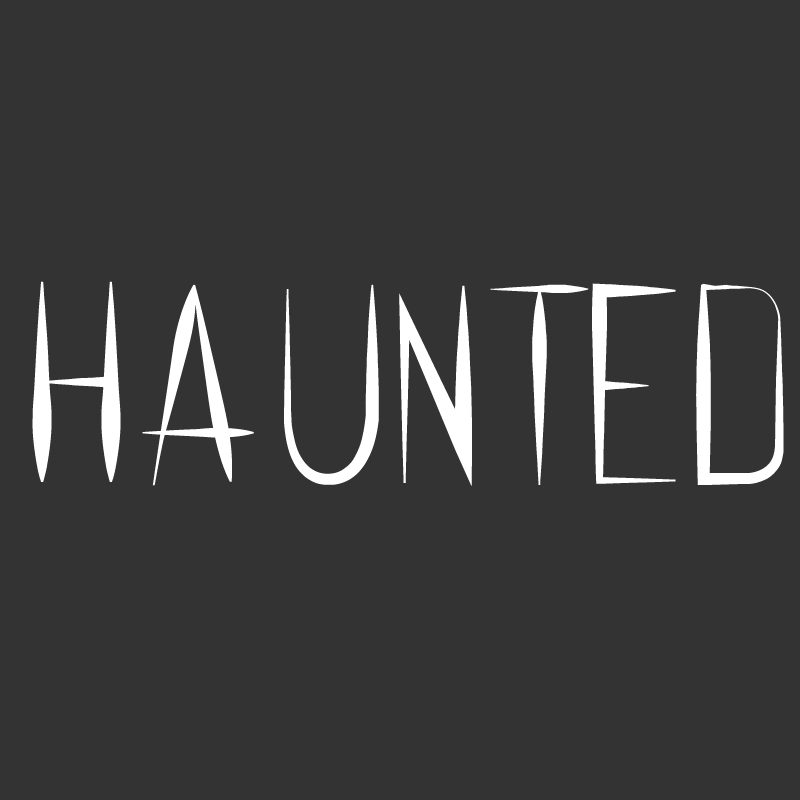
<style>
.page{position:relative;width:800px;height:800px;background:#333333}
.page>*{position:absolute;margin:0}
.t1{font:250px "Feral-Regular";color:#ffffff}
</style>
<div class="page">
<p class="t1" style="left:32px;top:281px;width:752px;height:205px">Haunted</p>
</div>
